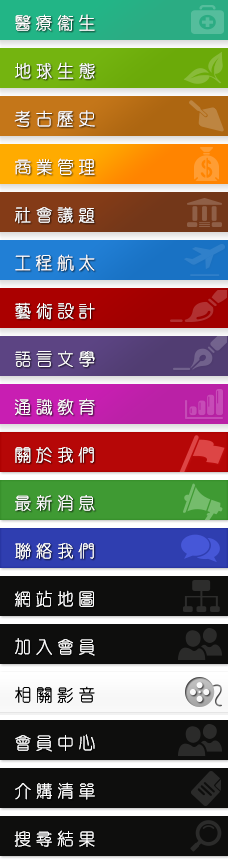
<style>
.page{position:relative;width:228px;height:864px}
.page>*{position:absolute;margin:0}
.t1{font:18px/48px "¥þ¯u²Ó¶êÅé";letter-spacing:0.2em;color:#ffffff}
.t2{font:18px "¥þ¯u²Ó¶êÅé";letter-spacing:0.2em;color:#000000}
</style>
<div class="page">
<p class="t1" style="left:14px;top:14px;width:81px;height:833px">醫療衛生<br>地球生態<br>考古歷史<br>商業管理<br>社會議題<br>工程航太<br>藝術設計<br>語言文學<br>通識教育<br>關於我們<br>最新消息<br>聯絡我們<br>網站地圖<br>加入會員<br><br>會員中心<br>介購清單<br>搜尋結果</p>
<p class="t1" style="left:14px;top:14px;width:81px;height:833px;opacity:0.63">醫療衛生<br>地球生態<br>考古歷史<br>商業管理<br>社會議題<br>工程航太<br>藝術設計<br>語言文學<br>通識教育<br>關於我們<br>最新消息<br>聯絡我們<br>網站地圖<br>加入會員<br><br>會員中心<br>介購清單<br>搜尋結果</p>
<p class="t2" style="left:15px;top:686px;width:80px;height:17px">相關影音</p>
<p class="t2" style="left:15px;top:686px;width:80px;height:17px">相關影音</p>
</div>
